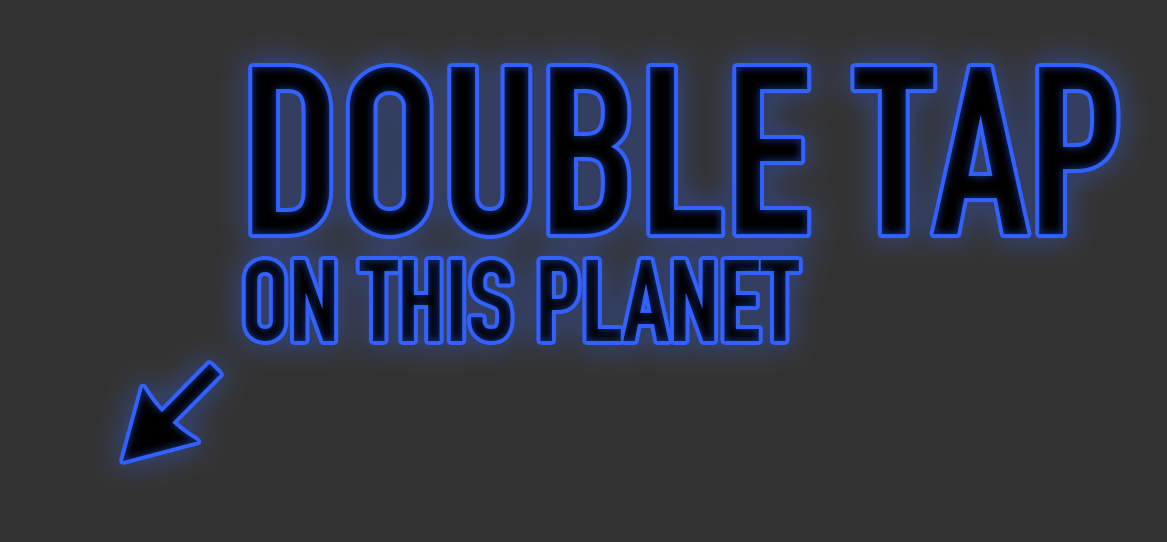
<style>
.page{position:relative;width:1167px;height:542px;background:#333333}
.page>*{position:absolute;margin:0}
.t1{font:233.7px "DINEngschrift";color:#02040b}
.t2{font:113.2px "DINEngschrift";color:#070e26}
</style>
<div class="page">
<p class="t1" style="left:252px;top:67px;width:865px;height:168px">DOUBLE TAP</p>
<p class="t2" style="left:245px;top:260px;width:554px;height:81px">ON THIS PLANET</p>
</div>
